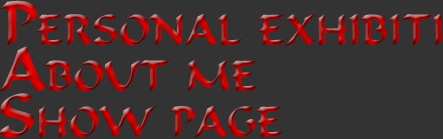
<style>
.page{position:relative;width:443px;height:139px;background:#333333}
.page>*{position:absolute;margin:0}
.t1{font:60px "Calligraphic";font-variant:small-caps}
.t2{font:60px "Calligraphic";text-transform:uppercase}
</style>
<div class="page">
<p class="t1" style="left:0px;top:0px;width:442px;height:47px">Personal exhibiti</p>
<p class="t1" style="left:0px;top:46px;width:257px;height:46px"><span class="t2">a</span>bout me</p>
<p class="t1" style="left:0px;top:93px;width:283px;height:45px"><span class="t2">s</span>how page</p>
</div>
